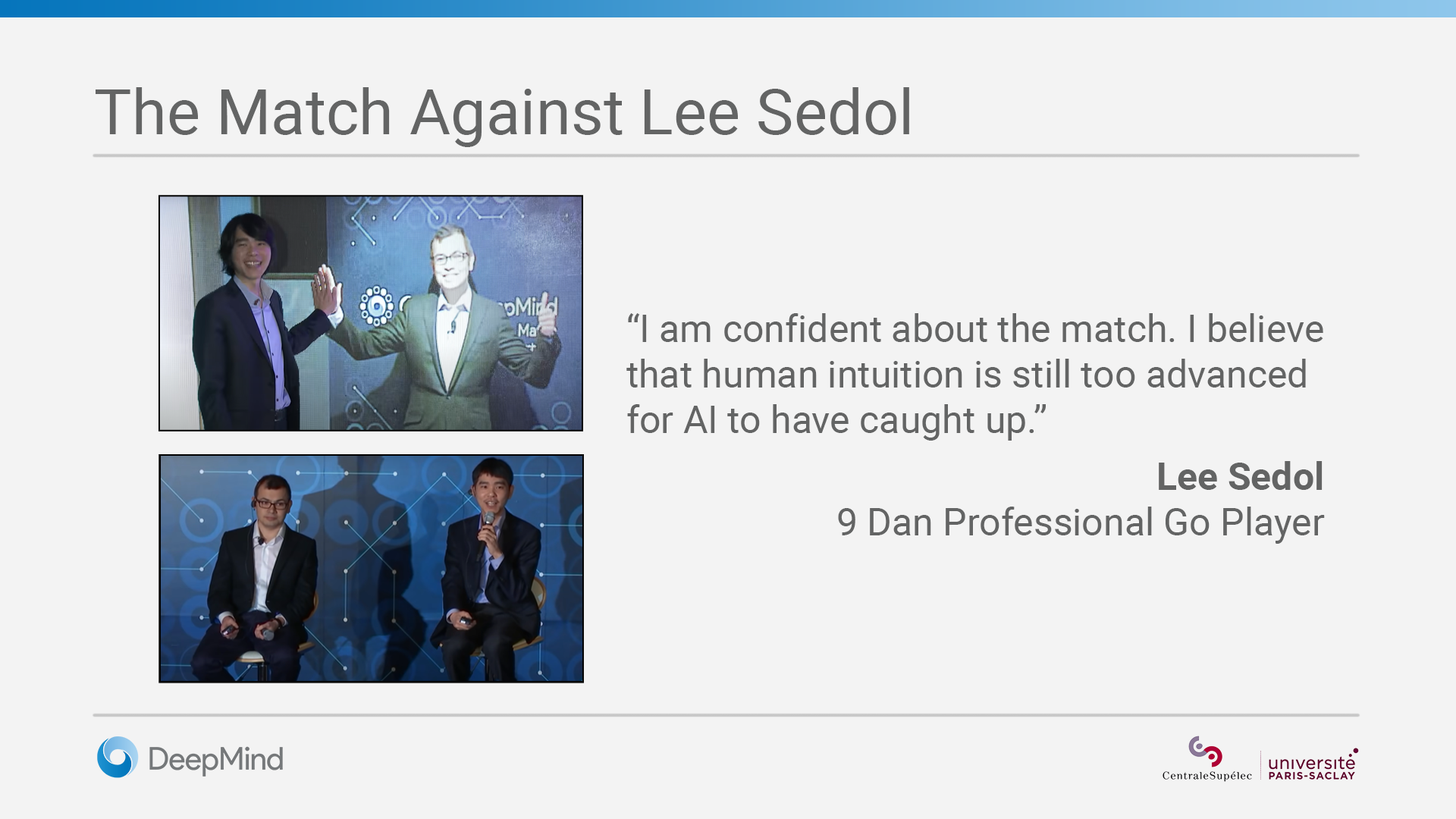
<style>
.page{position:relative;width:1456px;height:819px;background:#f3f3f3}
.page>*{position:absolute;margin:0}
.t1{font:63.2px "Roboto-Regular";color:#636464}
.t2{font:37.9px "Roboto-Regular";color:#636464}
.t3{font:37.9px "Roboto-Bold";color:#636464}
</style>
<div class="page">
<p class="t1" style="left:96px;top:87px;width:813px;height:60px">The Match Against Lee Sedol</p>
<p class="t2" style="left:626px;top:313px;width:697px;height:128px">“I am confident about the match. I believe that human intuition is still too advanced for AI to have caught up.”</p>
<p class="t3" style="left:1159px;top:461px;width:164px;height:29px">Lee Sedol</p>
<p class="t2" style="left:838px;top:507px;width:487px;height:37px">9 Dan Professional Go Player</p>
</div>
